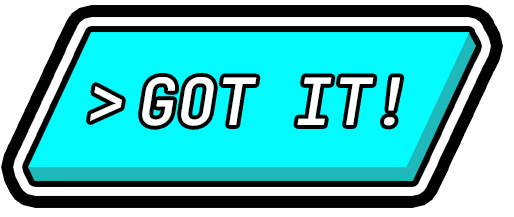
<style>
.page{position:relative;width:514px;height:217px;background:#01fbff}
.page>*{position:absolute;margin:0}
.t1{font:65px "JetBrainsMonoItalic-MediumItalic";color:#ffffff}
</style>
<div class="page">
<p class="t1" style="left:90px;top:77px;width:311px;height:49px">GOT IT!</p>
</div>
